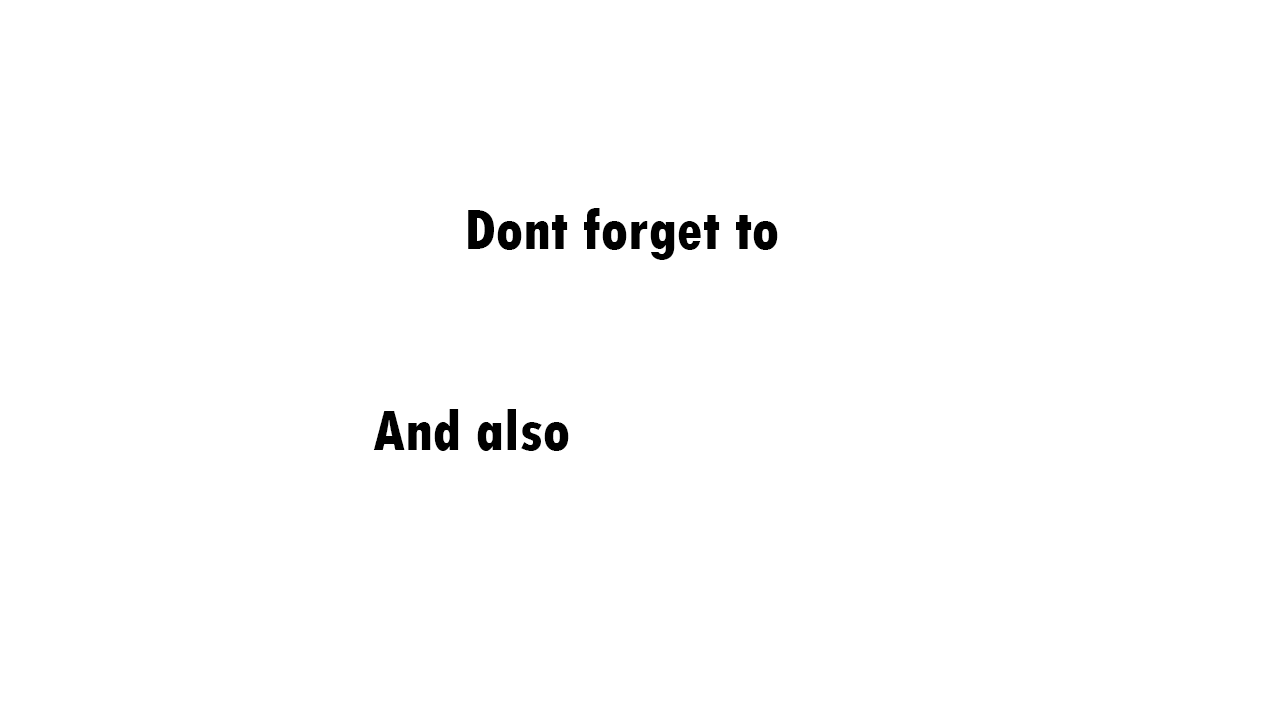
<style>
.page{position:relative;width:1280px;height:720px;background:#ffffff}
.page>*{position:absolute;margin:0}
.t1{font:60px "TwCenMT-CondensedExtraBold";color:#000000}
</style>
<div class="page">
<p class="t1" style="left:468px;top:208px;width:310px;height:52px">Dont forget to</p>
<p class="t1" style="left:373px;top:409px;width:196px;height:42px">And also</p>
</div>
